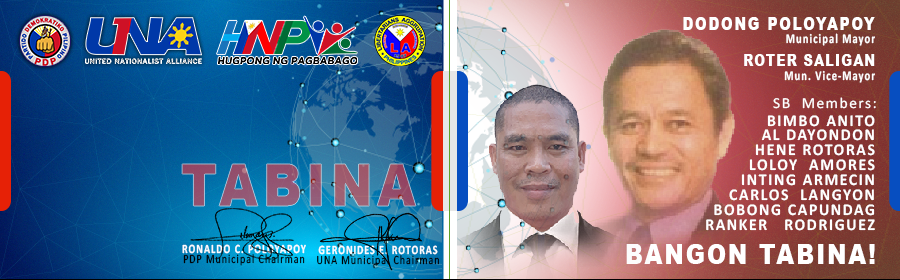
<style>
.page{position:relative;width:900px;height:280px}
.page>*{position:absolute;margin:0}
.t1{font:18.2px/13.4px "Arial-Black";letter-spacing:0.1em;color:#ffffff;scale:0.79 1}
.t2{font:13.4px/13.4px "Calibri-Bold";letter-spacing:0.1em;color:#ffffff;scale:0.79 1}
.t3{font:16.2px/23.4px "Arial-Black";letter-spacing:0.1em;color:#ffffff;scale:0.79 1}
.t4{font:16.2px/20.1px "Arial-Black";letter-spacing:0.1em;color:#ffffff;scale:0.79 1}
.t5{font:15.2px "Calibri";letter-spacing:0.1em;color:#ffffff}
.t6{font:16.6px/14.9px "Calibri-Bold";letter-spacing:0.1em;color:#ffffff;scale:0.95 1}
.t7{font:58.4px "Arial-Black";letter-spacing:0.1em;color:#945770;scale:0.86 1}
.t8{font:12.9px/10px "Calibri";letter-spacing:0.1em;color:#000000;scale:0.78 1}
.t9{font:12.9px/10px "Calibri-Bold";letter-spacing:0.1em;color:#fcfcfe;scale:0.78 1}
.t10{font:12.9px/10px "Calibri";letter-spacing:0.1em;color:#000000;scale:0.77 1}
.t11{font:12.9px/10px "Calibri-Bold";letter-spacing:0.1em;color:#fdfdfe;scale:0.77 1}
.t12{font:27.5px "Arial-Black";letter-spacing:0.1em;color:#ffffff;scale:0.83 1}
</style>
<div class="page">
<p class="t1" style="left:683px;top:17px;width:192px;height:66px;text-align:right">DODONG POLOYAPOY<br><span class="t2">Municipal Mayor<br></span><span class="t3">ROTER</span><span class="t4"> SALIGAN<br></span><span class="t2">Mun. Vice-Mayor</span></p>
<p class="t5" style="left:773px;top:97px;width:103px;height:12px">SB  Members:</p>
<p class="t6" style="left:706px;top:115px;width:169px;height:116px;text-align:right">BIMBO ANITO<br>AL DAYONDON<br>HENE ROTORAS<br>LOLOY  AMORES<br>INTING ARMECIN<br>CARLOS  LANGYON<br>BOBONG CAPUNDAG<br>RANKER   RODRIGUEZ</p>
<p class="t7" style="left:182px;top:164px;width:234px;height:42px">TABINA</p>
<p class="t8" style="left:182px;top:244px;width:124px;height:22px;text-align:center"><span class="t9">RONALDO C. POLOYAPOY<br></span>PDP Municipal Chairman</p>
<p class="t10" style="left:317px;top:245px;width:122px;height:22px;text-align:center"><span class="t11">GERONIDES E. ROTORAS<br></span>UNA Municipal Chairman</p>
<p class="t12" style="left:626px;top:244px;width:249px;height:20px">BANGON TABINA!</p>
</div>
